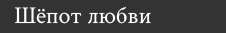
<style>
.page{position:relative;width:226px;height:33px;background:#333333}
.page>*{position:absolute;margin:0}
.t1{font:24px "CrimsonText-Regular";color:#ffffff}
</style>
<div class="page">
<p class="t1" style="left:15px;top:6px;width:136px;height:18px">Шёпот любви</p>
</div>
